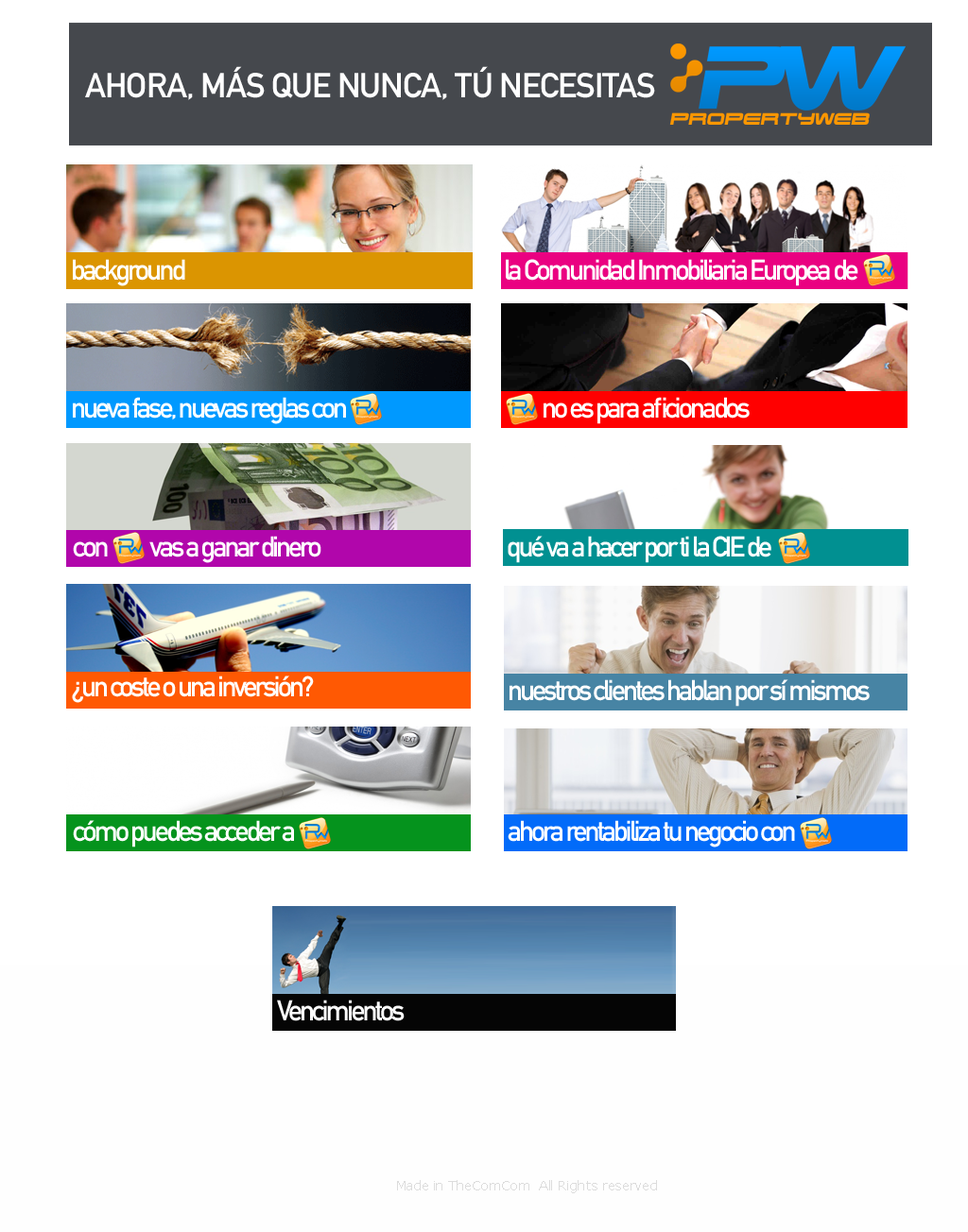
<style>
.page{position:relative;width:968px;height:1232px;background:#ffffff}
.page>*{position:absolute;margin:0}
.t1{font:34px "DINMittelschriftStd";letter-spacing:-0.025em;color:#ffffff}
.t2{font:28.3px "DINMittelschriftStd";letter-spacing:-0.1em;color:#ffffff}
.t3{font:13.2px "MSReferenceSansSerif";letter-spacing:-0.025em;color:#dcdcdc}
</style>
<div class="page">
<p class="t1" style="left:85px;top:66px;width:570px;height:34px">AHORA, MÁS QUE NUNCA, TÚ NECESITAS</p>
<p class="t2" style="left:73px;top:259px;width:112px;height:27px">background</p>
<p class="t2" style="left:506px;top:259px;width:352px;height:27px">la Comunidad Inmobiliaria Europea de</p>
<p class="t2" style="left:73px;top:397px;width:273px;height:27px">nueva fase, nuevas reglas con</p>
<p class="t2" style="left:543px;top:397px;width:206px;height:27px">no es para aficionados</p>
<p class="t2" style="left:73px;top:536px;width:248px;height:27px">con           vas a ganar dinero</p>
<p class="t2" style="left:507px;top:536px;width:264px;height:27px">qué va a hacer por ti la CIE de</p>
<p class="t2" style="left:72px;top:676px;width:242px;height:27px">¿un coste o una inversión?</p>
<p class="t2" style="left:509px;top:679px;width:360px;height:28px">nuestros clientes hablan por sí mismos</p>
<p class="t2" style="left:73px;top:820px;width:221px;height:28px">cómo puedes acceder a</p>
<p class="t2" style="left:507px;top:820px;width:288px;height:28px">ahora rentabiliza tu negocio con</p>
<p class="t2" style="left:277px;top:1000px;width:127px;height:22px">Vencimientos</p>
<p class="t3" style="left:397px;top:1180px;width:260px;height:14px">Made in TheComCom  All Rights reserved</p>
</div>
